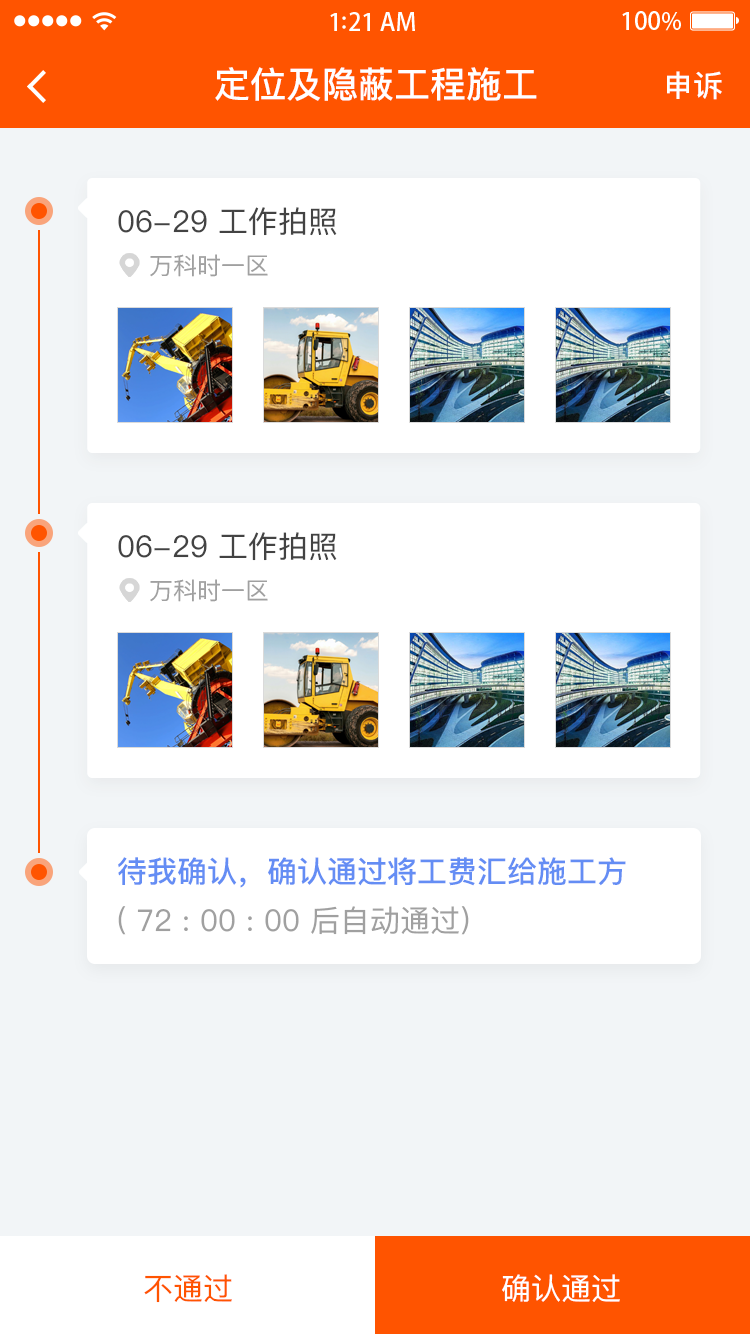
<style>
.page{position:relative;width:750px;height:1334px;background:#f2f5f7}
.page>*{position:absolute;margin:0}
.t1{font:36px "PingFangSC-Medium";color:#ffffff}
.t2{font:30px "PingFangSC-Medium";color:#ffffff}
.t3{font:30px "PingFangSC-Regular";color:#434343}
.t4{font:24px "PingFangSC-Regular";color:#a0a0a0}
.t5{font:30px "PingFangSC-Medium";color:#648df4}
.t6{font:30px "PingFangSC-Regular";color:#a0a0a0}
.t7{font:30px "PingFangSC-Regular";color:#ff5400}
.t8{font:30px "PingFangSC-Regular";color:#ffffff}
</style>
<div class="page">
<p class="t1" style="left:215px;top:67px;width:322px;height:34px">定位及隐蔽工程施工</p>
<p class="t2" style="left:667px;top:71px;width:55px;height:29px">申诉</p>
<p class="t3" style="left:118px;top:207px;width:219px;height:29px">06-29 工作拍照</p>
<p class="t4" style="left:150px;top:254px;width:118px;height:23px">万科时一区</p>
<p class="t3" style="left:118px;top:532px;width:219px;height:29px">06-29 工作拍照</p>
<p class="t4" style="left:150px;top:579px;width:118px;height:23px">万科时一区</p>
<p class="t5" style="left:118px;top:857px;width:508px;height:31px">待我确认，确认通过将工费汇给施工方</p>
<p class="t6" style="left:118px;top:906px;width:351px;height:29px">( 72 : 00 : 00 后自动通过)</p>
<p class="t7" style="left:144px;top:1274px;width:88px;height:29px">不通过</p>
<p class="t8" style="left:502px;top:1274px;width:118px;height:28px">确认通过</p>
</div>
